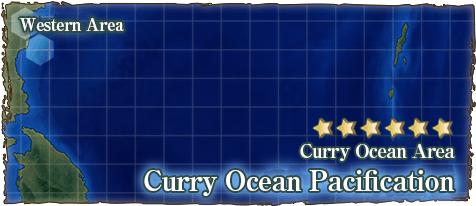
<style>
.page{position:relative;width:476px;height:206px}
.page>*{position:absolute;margin:0}
.t1{font:17px "RyuminPro-ExBold";letter-spacing:-0.04em;color:#ffffff}
.t2{font:19px "RyuminPro-ExBold";letter-spacing:-0.04em;color:#ffffff}
.t3{font:28px "RyuminPro-ExBold";letter-spacing:-0.04em;color:#ffffff}
</style>
<div class="page">
<p class="t1" style="left:19px;top:18px;width:105px;height:14px">Western Area</p>
<p class="t2" style="left:300px;top:143px;width:155px;height:18px">Curry Ocean Area</p>
<p class="t3" style="left:144px;top:170px;width:310px;height:26px">Curry Ocean Pacification</p>
</div>
